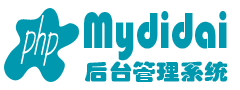
<style>
.page{position:relative;width:240px;height:90px;background:#ffffff}
.page>*{position:absolute;margin:0}
.t1{font:48px "CountryBlueprint";letter-spacing:0.005em;color:#ffffff;font-weight:bold;scale:0.44 1}
.t2{font:52.6px "STHupo";color:#0098af;scale:0.76 1}
.t3{font:21.4px "STHupo";color:#0098af;scale:1.12 1}
</style>
<div class="page">
<p class="t1" style="left:20px;top:15px;width:39px;height:51px;rotate:4deg">php</p>
<p class="t2" style="left:84px;top:11px;width:143px;height:50px">Mydidai</p>
<p class="t3" style="left:85px;top:61px;width:143px;height:21px">后台管理系统</p>
</div>
